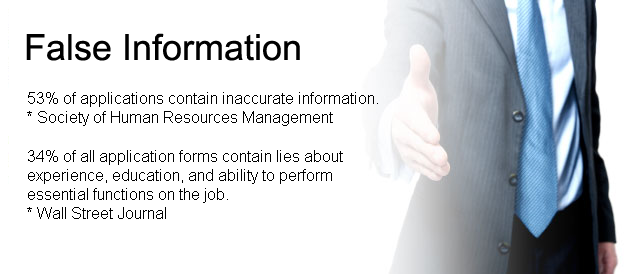
<style>
.page{position:relative;width:640px;height:274px;background:#ffffff}
.page>*{position:absolute;margin:0}
.t1{font:36px "ArialMT";color:#000000}
.t2{font:16px "ArialMT";color:#000000}
</style>
<div class="page">
<p class="t1" style="left:26px;top:33px;width:274px;height:28px">False Information</p>
<p class="t2" style="left:27px;top:92px;width:351px;height:127px">53% of applications contain inaccurate information.<br>* Society of Human Resources Management<br><br>34% of all application forms contain lies about <br>experience, education, and ability to perform <br>essential functions on the job. <br>* Wall Street Journal</p>
</div>
